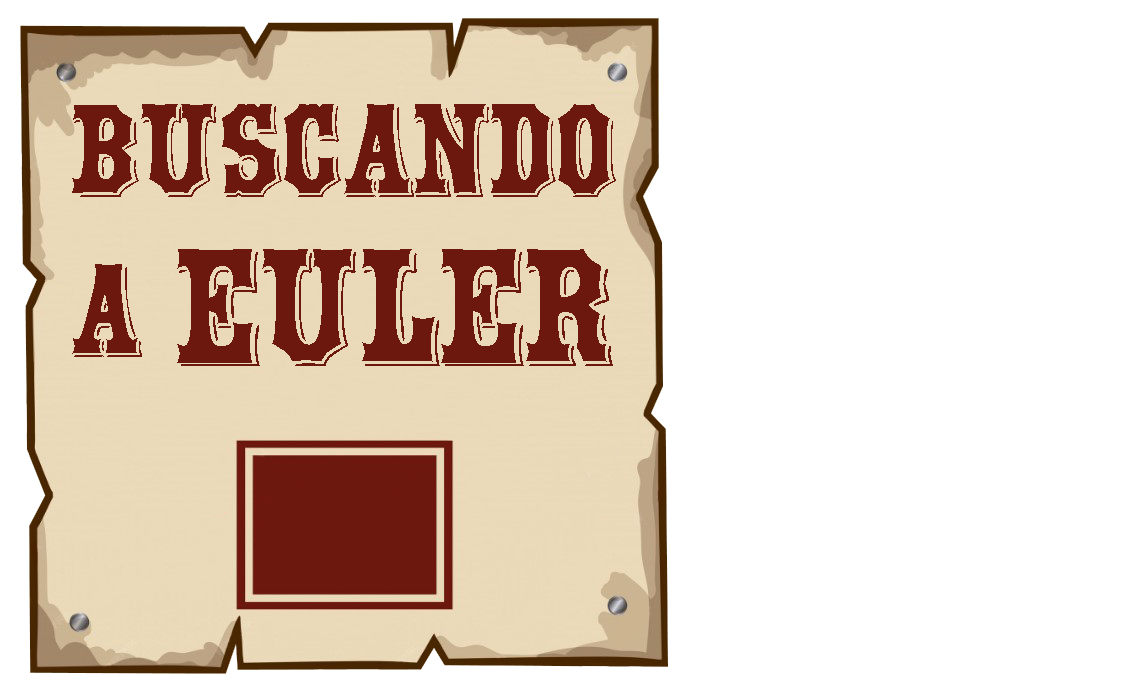
<style>
.page{position:relative;width:1134px;height:693px;background:#ffffff}
.page>*{position:absolute;margin:0}
.t1{font:133.3px "Montague";color:#6c180e}
.t2{font:166.7px "Montague";color:#6c180e}
</style>
<div class="page">
<p class="t1" style="left:72px;top:104px;width:544px;height:253px">buscand0<br>a</p>
<p class="t2" style="left:177px;top:249px;width:436px;height:117px">euler</p>
</div>
